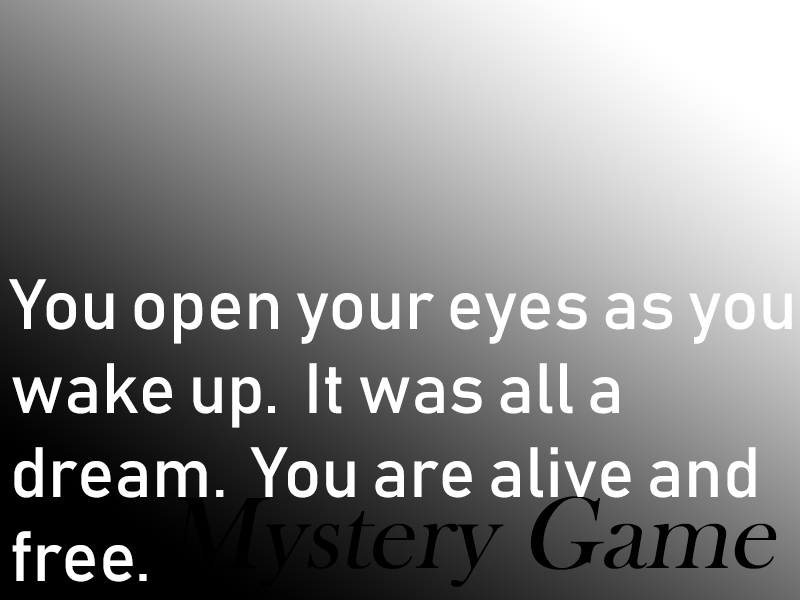
<style>
.page{position:relative;width:800px;height:600px}
.page>*{position:absolute;margin:0}
.t1{font:70px "Bahnschrift";color:#ffffff;font-style:italic}
.t2{font:105px "BaskOldFace";color:#000000;font-style:italic}
</style>
<div class="page">
<p class="t1" style="left:9px;top:279px;width:783px;height:303px">You open your eyes as you<br>wake up.  It was all a <br>dream.  You are alive and <br>free.</p>
<p class="t2" style="left:65px;top:496px;width:712px;height:91px">A Mystery Game</p>
</div>
